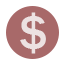
<style>
.page{position:relative;width:64px;height:64px;background:#ffffff}
.page>*{position:absolute;margin:0}
.t1{font:50px "FranklinGothic-Medium";color:#ece1e1}
</style>
<div class="page">
<p class="t1" style="left:20px;top:12px;width:26px;height:42px">$</p>
</div>
